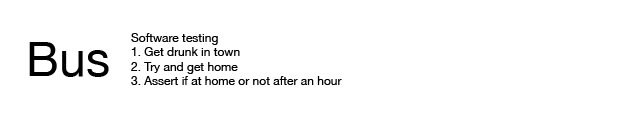
<style>
.page{position:relative;width:640px;height:117px;background:#ffffff}
.page>*{position:absolute;margin:0}
.t1{font:12px "HelveticaNeue";color:#000000}
.t2{font:48px "HelveticaNeue";color:#000000}
</style>
<div class="page">
<p class="t1" style="left:131px;top:33px;width:211px;height:52px">Software testing<br>1. Get drunk in town<br>2. Try and get home<br>3. Assert if at home or not after an hour</p>
<p class="t2" style="left:29px;top:42px;width:80px;height:35px">Bus</p>
</div>
